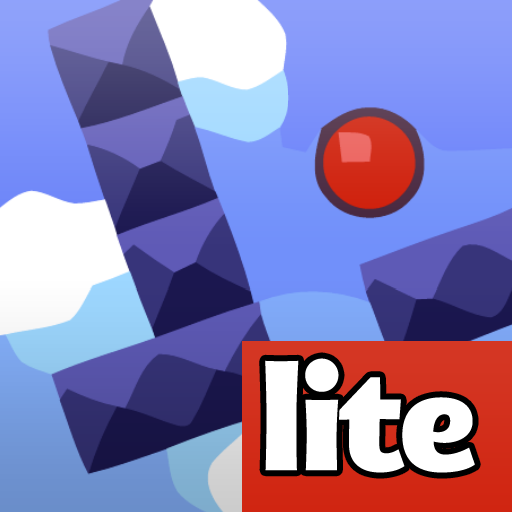
<style>
.page{position:relative;width:512px;height:512px}
.page>*{position:absolute;margin:0}
.t1{font:130px "MEgalopolisExtra";letter-spacing:-0.05em;color:#ffffff}
</style>
<div class="page">
<p class="t1" style="left:265px;top:358px;width:210px;height:115px">lite</p>
</div>
